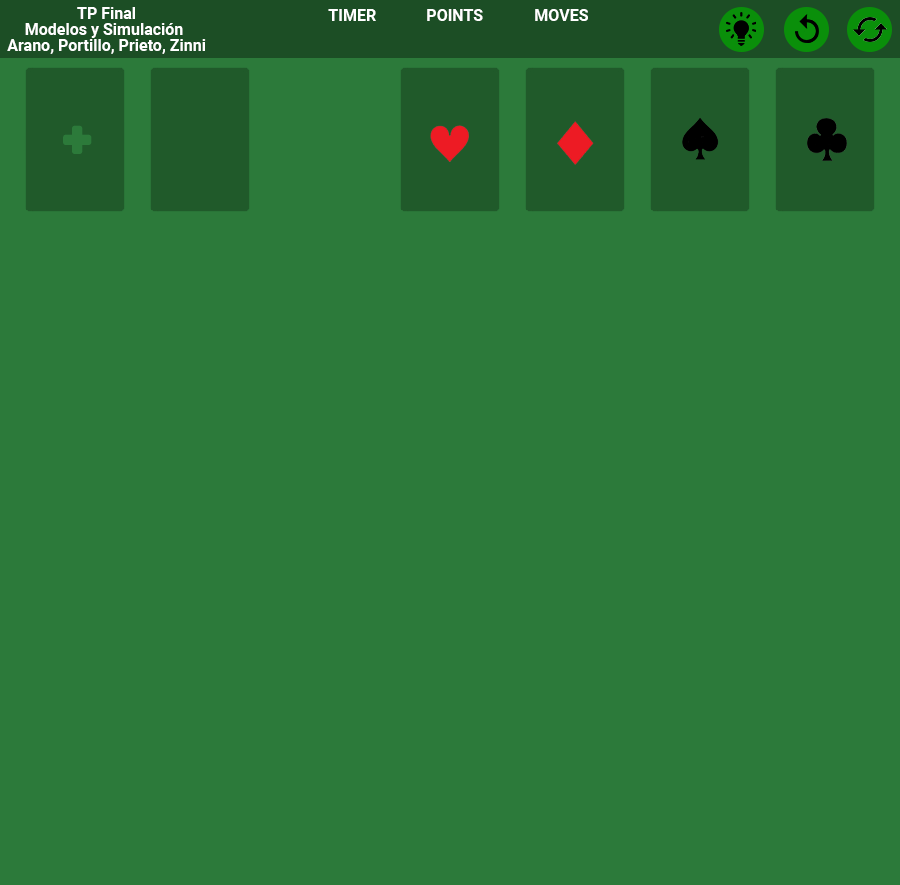
<style>
.page{position:relative;width:900px;height:885px;background:#2c7a3a}
.page>*{position:absolute;margin:0}
.t1{font:16px/16px "Roboto-Bold";color:#ffffff}
.t2{font:16px "Roboto-Bold";color:#ffffff}
.t3{font:72px "MADETommySoft-Bold";color:#2c7a3a}
</style>
<div class="page">
<p class="t1" style="left:7px;top:7px;width:199px;height:47px;text-align:center">TP Final<br>Modelos y Simulación<br>Arano, Portillo, Prieto, Zinni</p>
<p class="t2" style="left:328px;top:9px;width:48px;height:12px">TIMER</p>
<p class="t2" style="left:427px;top:9px;width:56px;height:12px">POINTS</p>
<p class="t2" style="left:535px;top:9px;width:53px;height:12px">MOVES</p>
<p class="t3" style="left:63px;top:125px;width:29px;height:29px">+</p>
</div>
